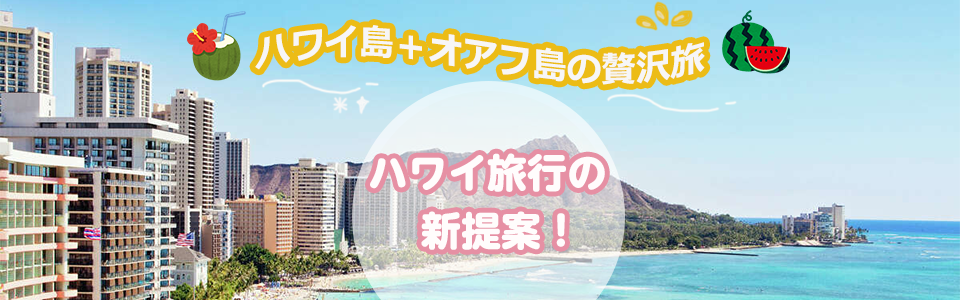
<style>
.page{position:relative;width:960px;height:300px}
.page>*{position:absolute;margin:0}
.t1{font:36px "Meiryo-Bold";color:#f7f6f6;scale:0.96 1}
.t2{font:39.9px/29.2px "UDShinMGoPro-Heavy";color:#f6f6f6}
</style>
<div class="page">
<p class="t1" style="left:255px;top:25px;width:450px;height:60px">ハワイ島＋オアフ島の贅沢旅</p>
<p class="t2" style="left:370px;top:153px;width:235px;height:97px;text-align:center">ハワイ旅行の<br><br>  新提案！</p>
</div>
